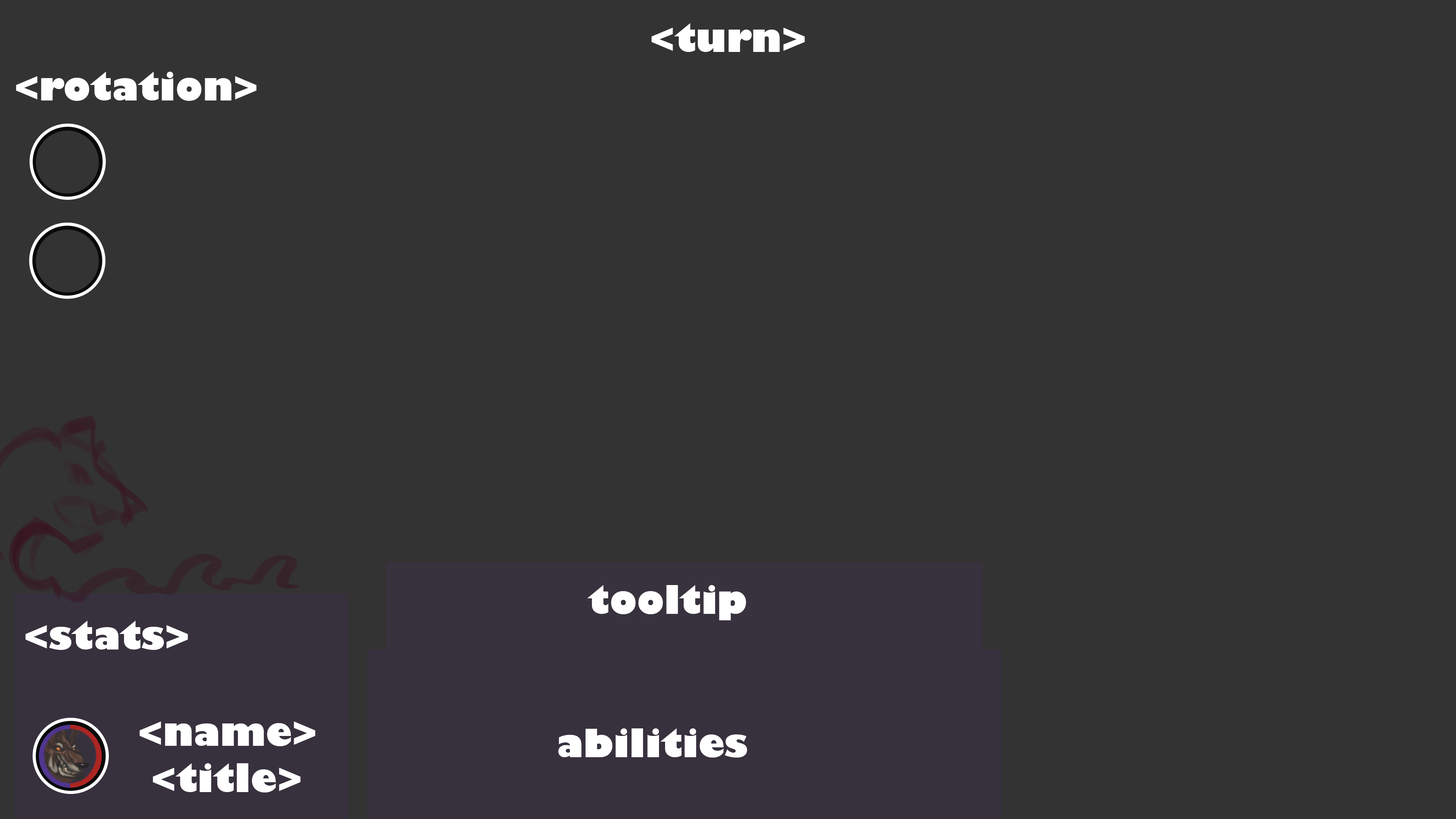
<style>
.page{position:relative;width:1456px;height:819px;background:#333333}
.page>*{position:absolute;margin:0}
.t1{font:37.9px "GillSans-UltraBold";color:#ffffff}
</style>
<div class="page">
<p class="t1" style="left:651px;top:23px;width:154px;height:29px">&lt;turn&gt;</p>
<p class="t1" style="left:16px;top:72px;width:241px;height:29px">&lt;rotation&gt;</p>
<p class="t1" style="left:587px;top:585px;width:159px;height:35px">tooltip</p>
<p class="t1" style="left:25px;top:621px;width:163px;height:29px">&lt;stats&gt;</p>
<p class="t1" style="left:140px;top:722px;width:175px;height:24px">&lt;name&gt;</p>
<p class="t1" style="left:558px;top:728px;width:189px;height:30px">abilities</p>
<p class="t1" style="left:153px;top:763px;width:148px;height:29px">&lt;title&gt;</p>
</div>
